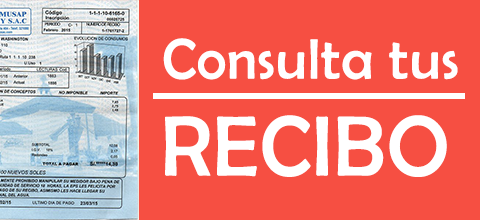
<style>
.page{position:relative;width:480px;height:220px;background:#f64f42}
.page>*{position:absolute;margin:0}
.t1{font:57.4px "BerlinSansFB-Reg";letter-spacing:0.015em;color:#ffffff}
.t2{font:86.1px "BerlinSansFB-Reg";letter-spacing:0.015em;color:#ffffff}
</style>
<div class="page">
<p class="t1" style="left:163px;top:38px;width:295px;height:42px">Consulta tus</p>
<p class="t2" style="left:165px;top:115px;width:282px;height:62px">RECIBOS</p>
</div>
